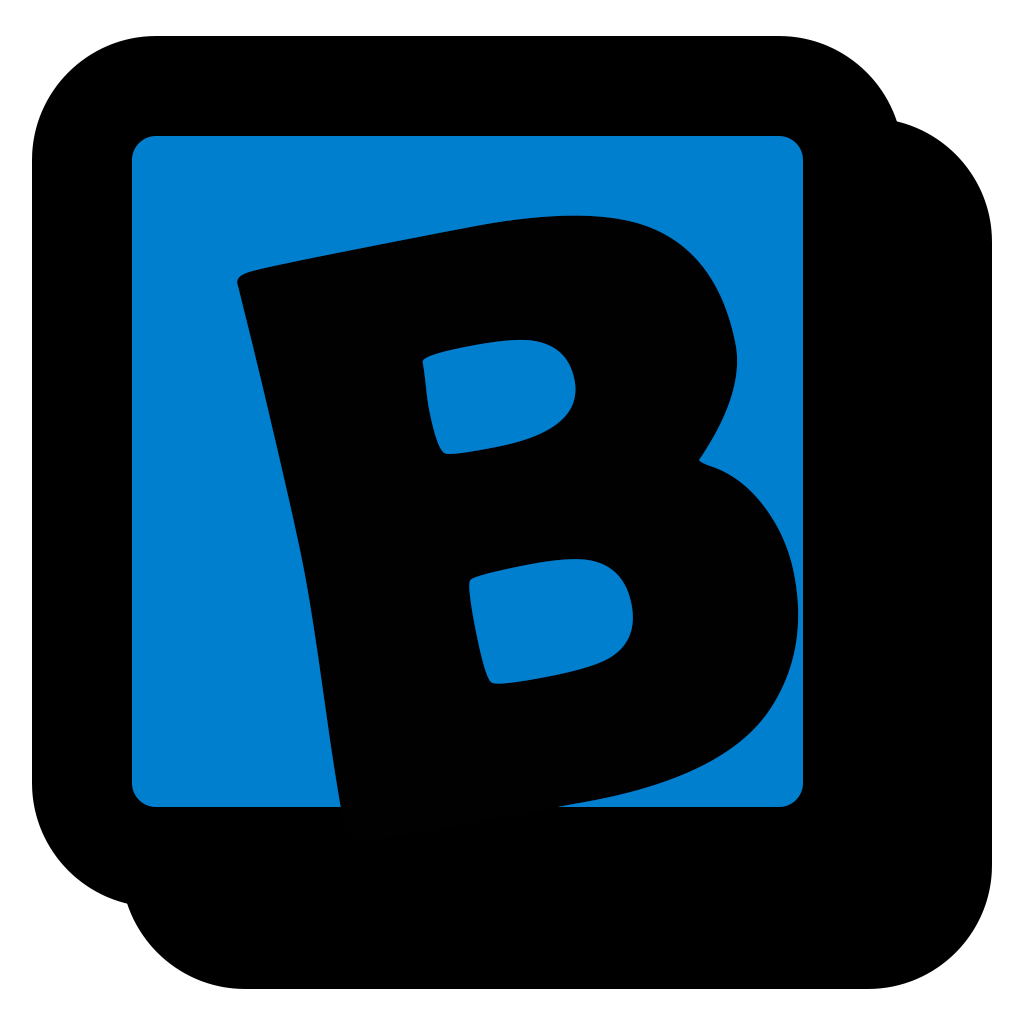
<style>
.page{position:relative;width:1024px;height:1024px;background:#000000}
.page>*{position:absolute;margin:0}
.t1{font:847px "BerlinSansFBDemi-Bold";color:#010101}
</style>
<div class="page">
<p class="t1" style="left:237px;top:215px;width:562px;height:625px;rotate:-11deg">B</p>
</div>
